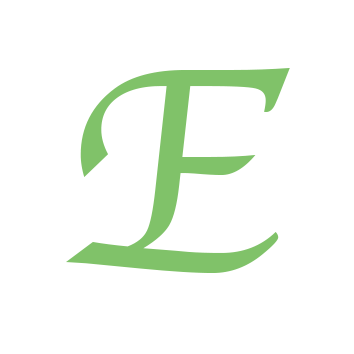
<style>
.page{position:relative;width:354px;height:354px;background:#ffffff}
.page>*{position:absolute;margin:0}
.t1{font:300px "Apple-Chancery";color:#80c269}
</style>
<div class="page">
<p class="t1" style="left:66px;top:68px;width:224px;height:205px">E</p>
</div>
